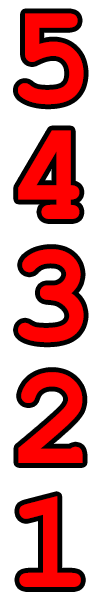
<style>
.page{position:relative;width:100px;height:600px;background:#ffffff}
.page>*{position:absolute;margin:0}
.t1{font:140px "CourierNewPS-BoldMT";color:#ff0000}
</style>
<div class="page">
<p class="t1" style="left:18px;top:13px;width:66px;height:92px">5</p>
<p class="t1" style="left:18px;top:130px;width:62px;height:89px">4</p>
<p class="t1" style="left:18px;top:249px;width:66px;height:94px">3</p>
<p class="t1" style="left:18px;top:372px;width:65px;height:91px">2</p>
<p class="t1" style="left:19px;top:496px;width:62px;height:91px">1</p>
</div>
